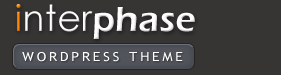
<style>
.page{position:relative;width:281px;height:75px;background:#373434}
.page>*{position:absolute;margin:0}
.t1{font:36px "ErasITC-Demi";letter-spacing:0.01em;color:#ffffff}
.t2{font:36px "CenturyGothic";letter-spacing:0.01em;color:#ff8400}
.t3{font:36px "CenturyGothic";letter-spacing:0.01em;color:#ffffff}
.t4{font:12.6px "TrebuchetMS";letter-spacing:0.2em;color:#ffffff;scale:1.11 1}
</style>
<div class="page">
<p class="t1" style="left:16px;top:4px;width:179px;height:35px"><span class="t2">i</span><span class="t3">nter</span>phase</p>
<p class="t4" style="left:22px;top:52px;width:161px;height:10px">WORDPRESS THEME</p>
</div>
